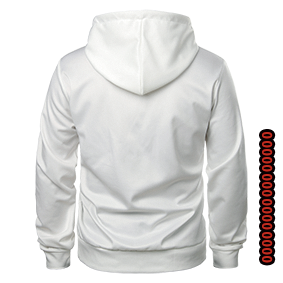
<style>
.page{position:relative;width:283px;height:283px;background:#ffffff}
.page>*{position:absolute;margin:0}
.t1{font:12px "AdobeHeitiStd-Regular";letter-spacing:0.1em;color:#c12c1f;font-weight:bold}
</style>
<div class="page">
<p class="t1" style="left:262px;top:132px;width:11px;height:131px;rotate:90deg">0000000000000000</p>
</div>
